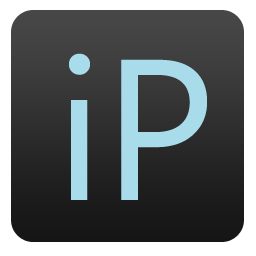
<style>
.page{position:relative;width:256px;height:256px}
.page>*{position:absolute;margin:0}
.t1{font:200px "MicrosoftPhagsPa";color:#a9dceb}
</style>
<div class="page">
<p class="t1" style="left:69px;top:53px;width:138px;height:147px">iP</p>
</div>
